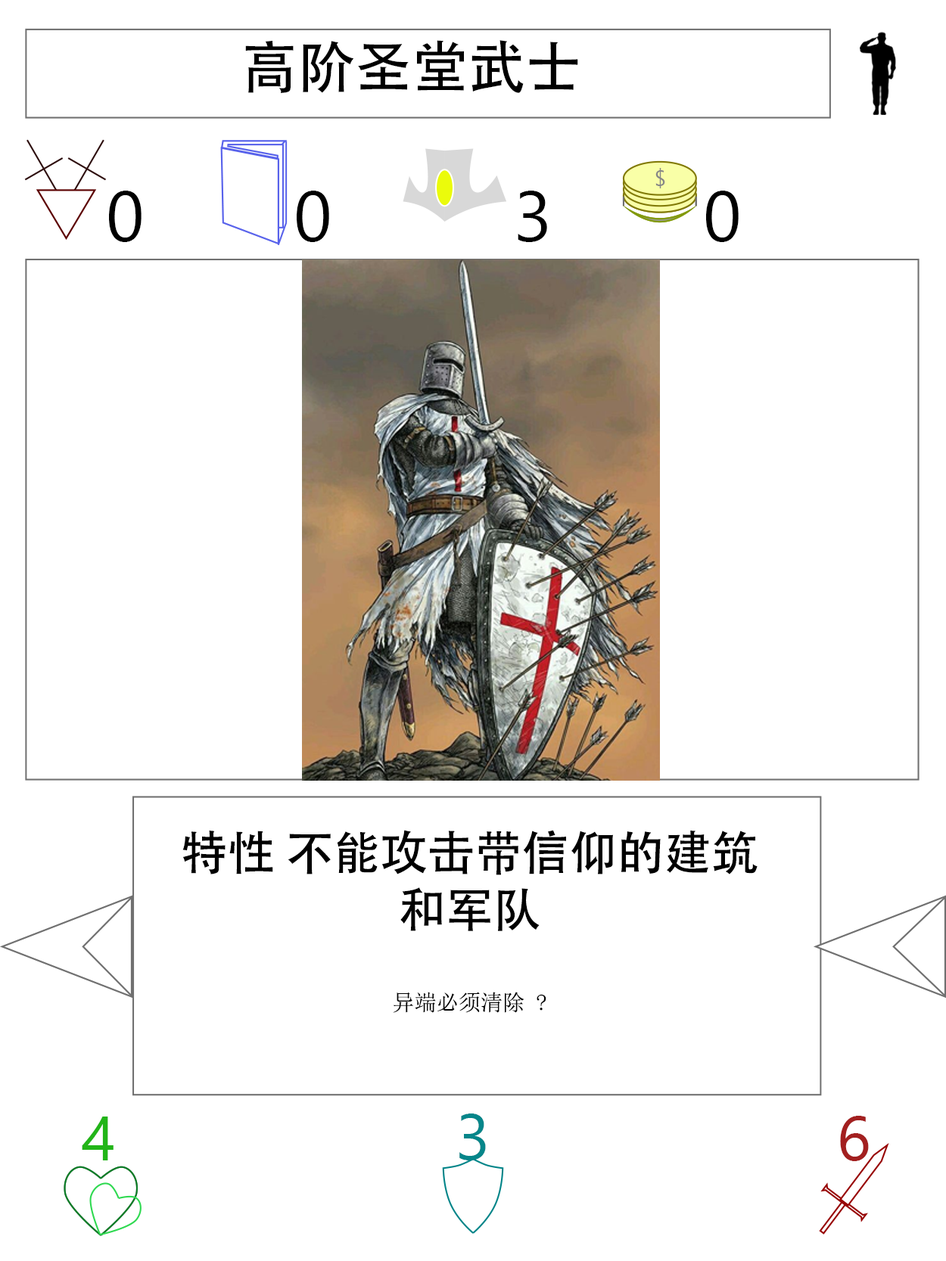
<style>
.page{position:relative;width:946px;height:1261px;background:#ffffff}
.page>*{position:absolute;margin:0}
.t1{font:56.7px "AdobeHeitiStd-Regular";color:#000000}
.t2{font:70.9px "SegoeUI";color:#000000}
.t3{font:47.3px "AdobeHeitiStd-Regular";color:#000000}
.t4{font:22.1px "NSimSun";color:#000000}
.t5{font:63px "SegoeUI";color:#22b518}
.t6{font:64.6px "SegoeUI";color:#05868a}
.t7{font:63px "SegoeUI";color:#a32020}
</style>
<div class="page">
<p class="t1" style="left:245px;top:40px;width:333px;height:53px">高阶圣堂武士</p>
<p class="t2" style="left:109px;top:191px;width:32px;height:51px">0</p>
<p class="t2" style="left:297px;top:191px;width:32px;height:51px">0</p>
<p class="t2" style="left:517px;top:191px;width:30px;height:51px">3</p>
<p class="t2" style="left:706px;top:191px;width:32px;height:51px">0</p>
<p class="t3" style="left:182px;top:830px;width:575px;height:183px;text-align:center">特性 不能攻击带信仰的建筑和军队<br><br><span class="t4">异端必须清除 ?</span></p>
<p class="t5" style="left:82px;top:1117px;width:31px;height:43px">4</p>
<p class="t6" style="left:459px;top:1114px;width:27px;height:46px">3</p>
<p class="t7" style="left:840px;top:1116px;width:28px;height:45px">6</p>
</div>
